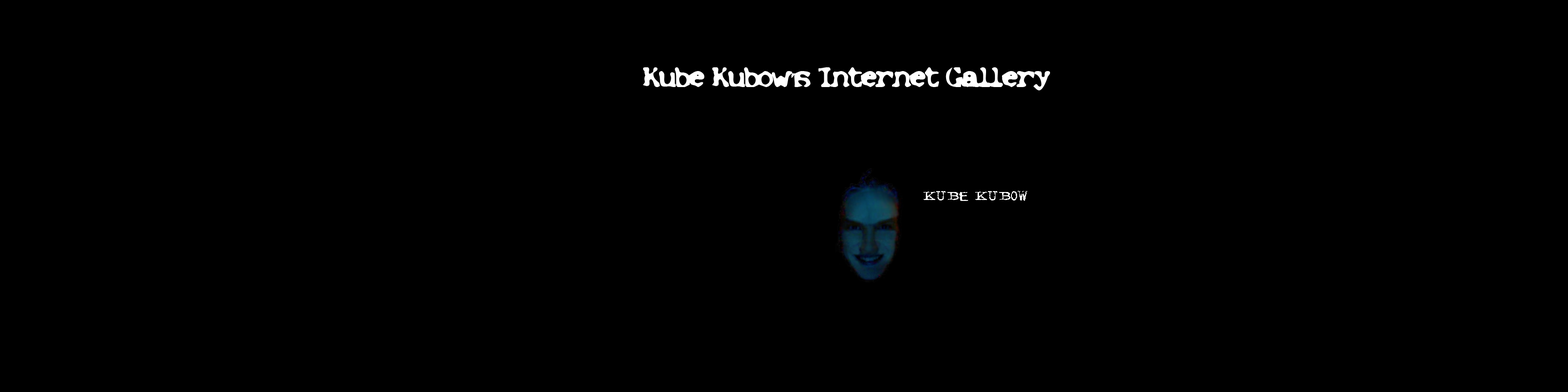
<style>
.page{position:relative;width:1568px;height:392px;background:#000000}
.page>*{position:absolute;margin:0}
.t1{font:23.5px "Pretext";color:#ffffff}
.t2{font:23.5px "Pretext";color:#000000}
</style>
<div class="page">
<p class="t1" style="left:643px;top:67px;width:407px;height:23px"><span class="t2"><br></span>Kube Kubow’s Internet Gallery</p>
</div>
